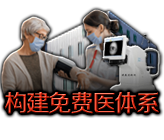
<style>
.page{position:relative;width:164px;height:140px;background:#ffffff}
.page>*{position:absolute;margin:0}
.t1{font:23.4px "FZZZHUNHJW--GB1-0";letter-spacing:-0.06em}
</style>
<div class="page">
<p class="t1" style="left:5px;top:92px;width:154px;height:22px">构建免费医体系</p>
</div>
